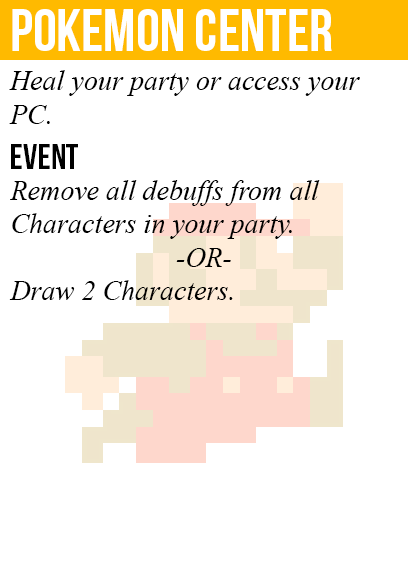
<style>
.page{position:relative;width:408px;height:585px;background:#ffffff}
.page>*{position:absolute;margin:0}
.t1{font:60px "BebasNeue";color:#ffffff}
.t2{font:28px "TimesNewRomanPS-ItalicMT";color:#000000}
.t3{font:36px "BebasNeue";color:#000000}
</style>
<div class="page">
<p class="t1" style="left:12px;top:9px;width:320px;height:42px">pokemon center</p>
<p class="t2" style="left:9px;top:70px;width:351px;height:54px">Heal your party or access your<br>PC.</p>
<p class="t3" style="left:11px;top:144px;width:67px;height:25px">event</p>
<p class="t2" style="left:9px;top:180px;width:311px;height:120px">Remove all debuffs from all<br>Characters in your party.<br><br>Draw 2 Characters.</p>
<p class="t2" style="left:176px;top:248px;width:55px;height:19px">-OR-</p>
</div>
